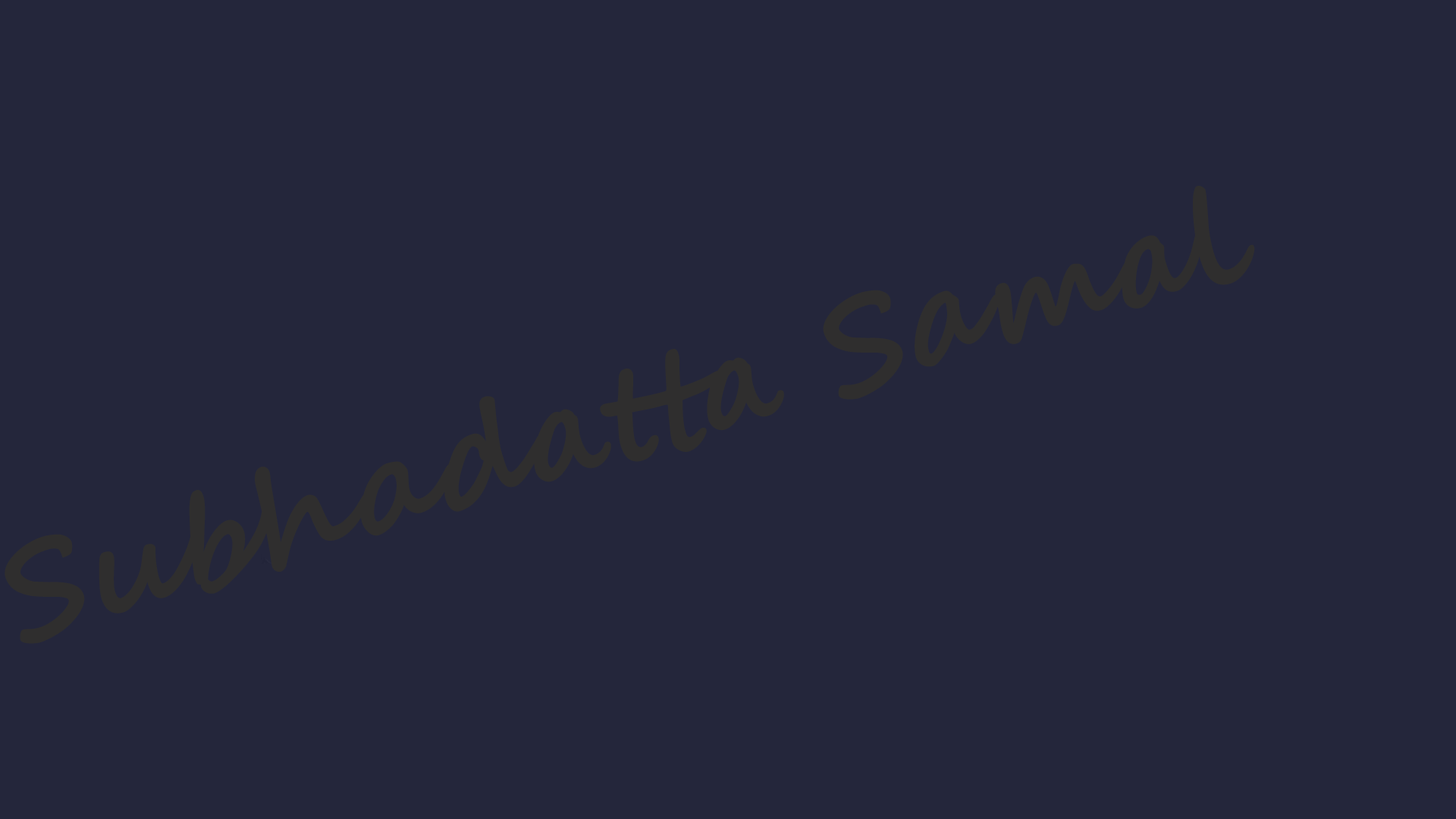
<style>
.page{position:relative;width:1456px;height:819px;background:#24263b}
.page>*{position:absolute;margin:0}
.t1{font:132.7px "SegoeScript-Bold";color:#2f2e2e}
</style>
<div class="page">
<p class="t1" style="left:5px;top:186px;width:1250px;height:458px;rotate:-17deg">Subhadatta Samal</p>
</div>
